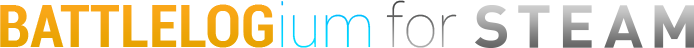
<style>
.page{position:relative;width:694px;height:48px;background:#ffffff}
.page>*{position:absolute;margin:0}
.t1{font:60px "Roboto-BoldCondensed";color:#f1a50d}
.t2{font:60px "Roboto-Thin";color:#00ceff}
.t3{font:60px "Roboto-BoldCondensed";color:#00ceff}
.t4{font:60px "Roboto-Thin"}
</style>
<div class="page">
<p class="t1" style="left:0px;top:4px;width:273px;height:44px">BATTLELOG</p>
<p class="t2" style="left:281px;top:1px;width:90px;height:47px"><span class="t3">         </span>ium</p>
<p class="t4" style="left:386px;top:0px;width:71px;height:48px">for</p>
</div>
